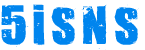
<style>
.page{position:relative;width:145px;height:50px;background:#ffffff}
.page>*{position:absolute;margin:0}
.t1{font:46px "321impact";letter-spacing:0.1em;color:#0085ee}
</style>
<div class="page">
<p class="t1" style="left:1px;top:4px;width:138px;height:46px">5iSNS</p>
</div>
